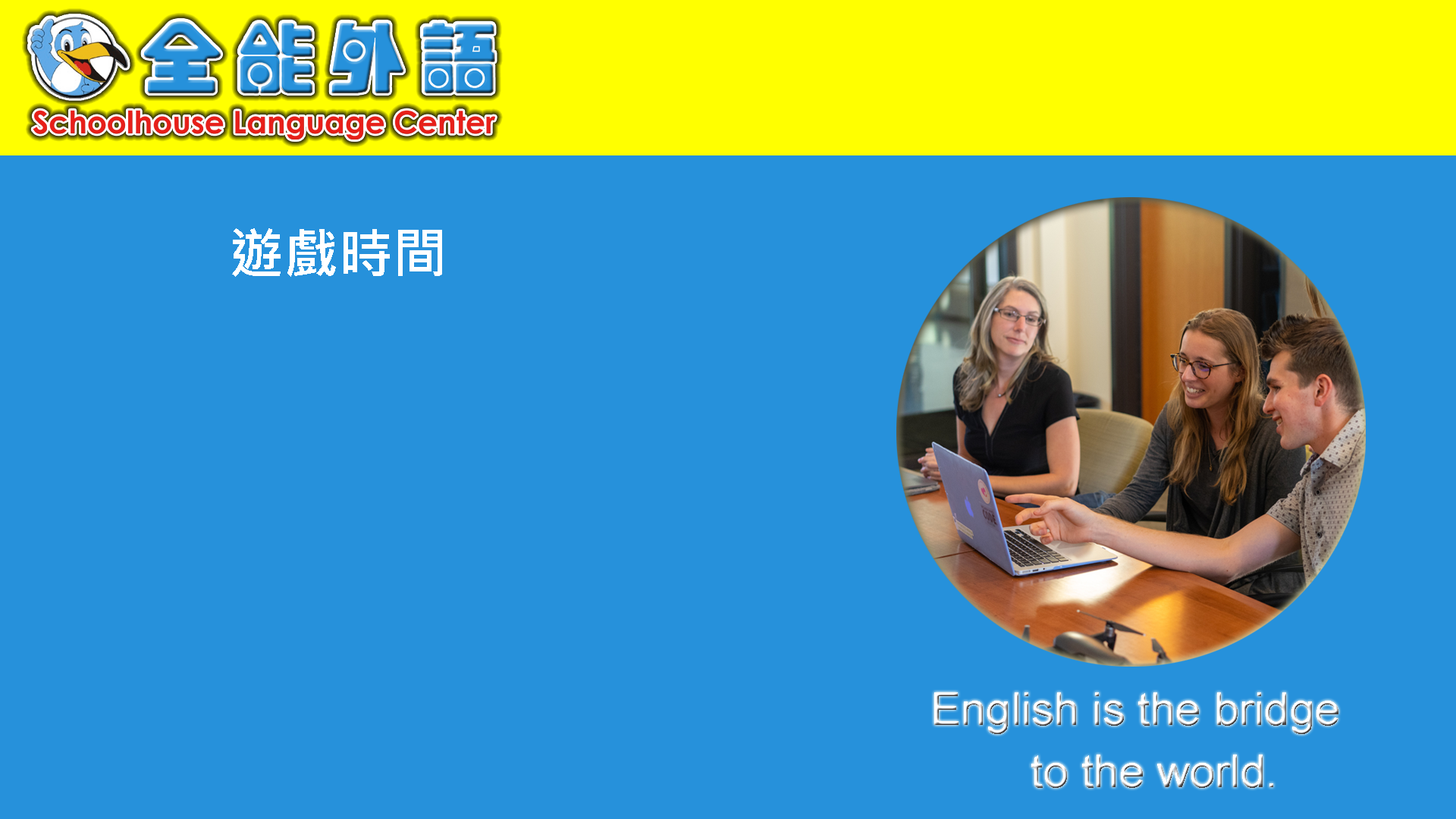
<style>
.page{position:relative;width:1456px;height:819px;background:#2691db}
.page>*{position:absolute;margin:0}
.t1{font:54.6px "MicrosoftJhengHeiBold";color:#ffffff}
.t2{font:45.5px "ArialMT"}
</style>
<div class="page">
<p class="t1" style="left:232px;top:228px;width:210px;height:49px">遊戲時間</p>
<p class="t2" style="left:934px;top:692px;width:404px;height:42px">English is the bridge</p>
<p class="t2" style="left:1031px;top:755px;width:242px;height:33px">to the world.</p>
</div>
